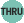
<style>
.page{position:relative;width:24px;height:23px;background:#7cc2b4}
.page>*{position:absolute;margin:0}
.t1{font:9.5px "BellGothicStd-Black";letter-spacing:-0.1em;color:#292929}
</style>
<div class="page">
<p class="t1" style="left:0px;top:7px;width:23px;height:8px">THRU</p>
</div>
